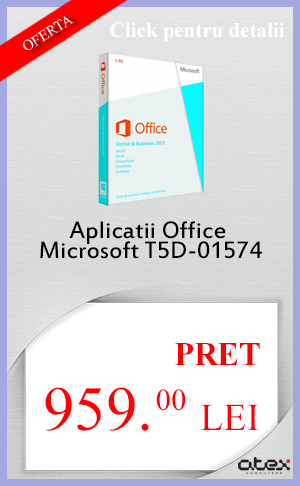
<style>
.page{position:relative;width:300px;height:486px;background:#ffffff}
.page>*{position:absolute;margin:0}
.t1{font:15px "TimesNewRomanPSMT";color:#ffffff}
.t2{font:21px "TimesNewRomanPS-BoldMT";color:#ffffff}
.t3{font:26px/20px "EstrangeloEdessa";color:#000000}
.t4{font:33px "TimesNewRomanPS-BoldMT";color:#ff0000}
.t5{font:63px "TimesNewRomanPSMT";color:#ff0000}
.t6{font:38px "TimesNewRomanPSMT";color:#ff0000}
.t7{font:31px "TimesNewRomanPSMT";color:#ff0000}
</style>
<div class="page">
<p class="t1" style="left:23px;top:16px;width:51px;height:34px;rotate:-32deg">OFERTA</p>
<p class="t2" style="left:110px;top:22px;width:175px;height:20px">Click pentru detalii</p>
<p class="t3" style="left:40px;top:221px;width:222px;height:38px;text-align:center">Aplicatii Office <br>Microsoft T5D-01574</p>
<p class="t4" style="left:175px;top:343px;width:85px;height:22px">PRET</p>
<p class="t5" style="left:45px;top:387px;width:214px;height:44px">959.   <span class="t6">LEI</span></p>
<p class="t7" style="left:156px;top:389px;width:30px;height:22px">00</p>
</div>
